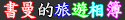
<style>
.page{position:relative;width:125px;height:20px;background:#333333}
.page>*{position:absolute;margin:0}
.t1{font:18px "DFKaiShu-SB-Estd-BF";color:#ffffff}
</style>
<div class="page">
<p class="t1" style="left:4px;top:1px;width:15px;height:18px">書</p>
<p class="t1" style="left:21px;top:1px;width:15px;height:18px">曼</p>
<p class="t1" style="left:38px;top:2px;width:15px;height:15px">的</p>
<p class="t1" style="left:54px;top:2px;width:18px;height:15px">旅</p>
<p class="t1" style="left:71px;top:2px;width:18px;height:16px">遊</p>
<p class="t1" style="left:88px;top:2px;width:15px;height:16px">相</p>
<p class="t1" style="left:107px;top:1px;width:15px;height:17px">簿</p>
</div>
